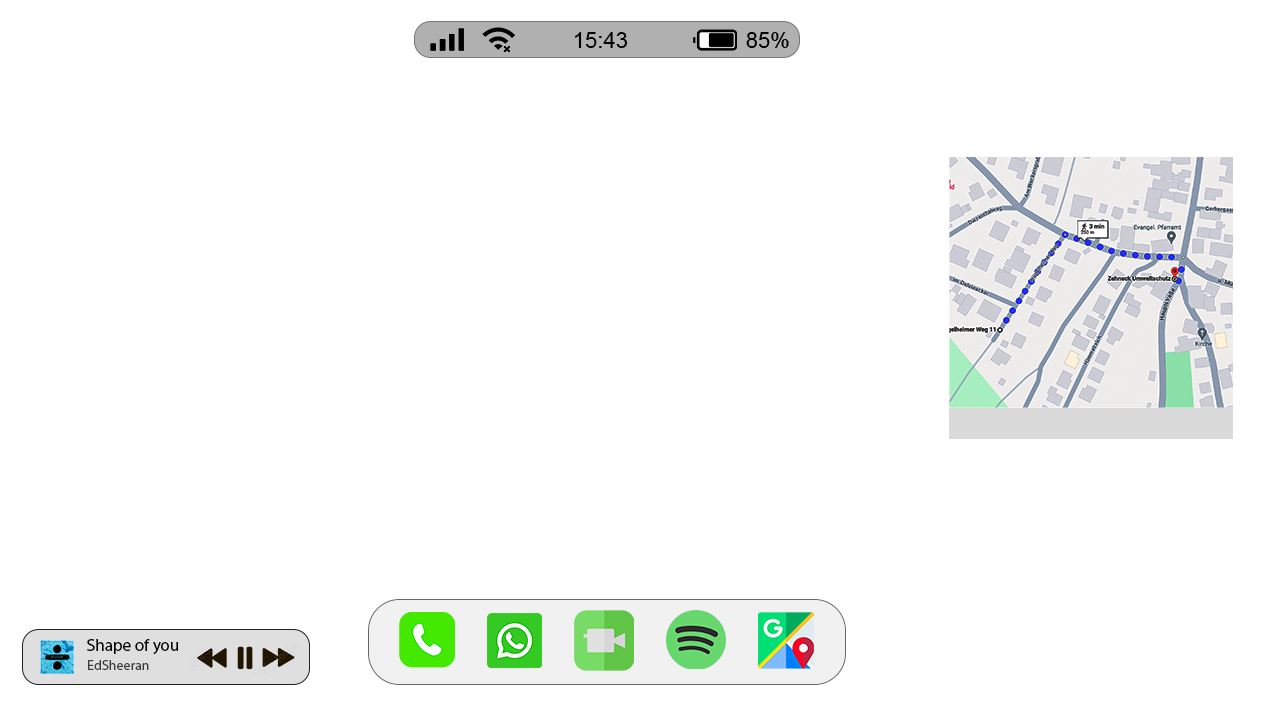
<style>
.page{position:relative;width:1280px;height:720px;background:#ffffff}
.page>*{position:absolute;margin:0}
.t1{font:22px "ArialMT";color:#000000}
.t2{font:17px "MyriadPro-Regular";color:#000000}
.t3{font:14px "MyriadPro-Regular";color:#3a3a3a}
</style>
<div class="page">
<p class="t1" style="left:575px;top:32px;width:52px;height:16px">15:43</p>
<p class="t1" style="left:746px;top:32px;width:43px;height:16px">85%</p>
<p class="t2" style="left:87px;top:639px;width:91px;height:16px">Shape of you</p>
<p class="t3" style="left:88px;top:660px;width:61px;height:10px">EdSheeran</p>
</div>
